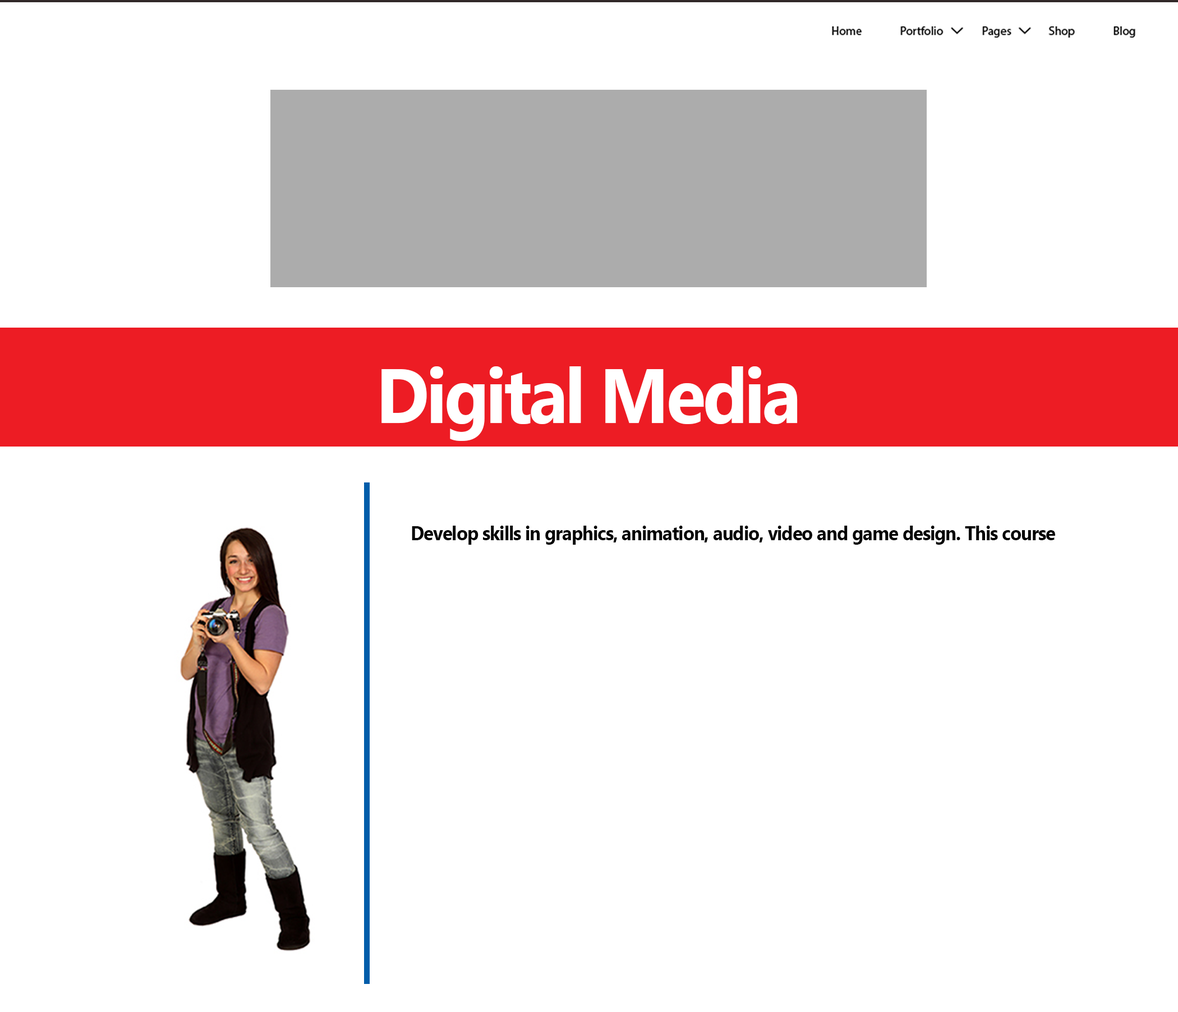
<style>
.page{position:relative;width:1178px;height:1012px;background:#ffffff}
.page>*{position:absolute;margin:0}
.t1{font:76.8px "MyanmarText-Bold";letter-spacing:-0.04em;color:#ffffff;scale:0.94 1}
.t2{font:19.8px "MyanmarText-Bold";letter-spacing:-0.04em;color:#010101;scale:0.94 1}
</style>
<div class="page">
<p class="t1" style="left:382px;top:366px;width:416px;height:75px">Digital Media</p>
<p class="t2" style="left:412px;top:526px;width:724px;height:19px">Develop skills in graphics, animation, audio, video and game design. This course is offered</p>
</div>
